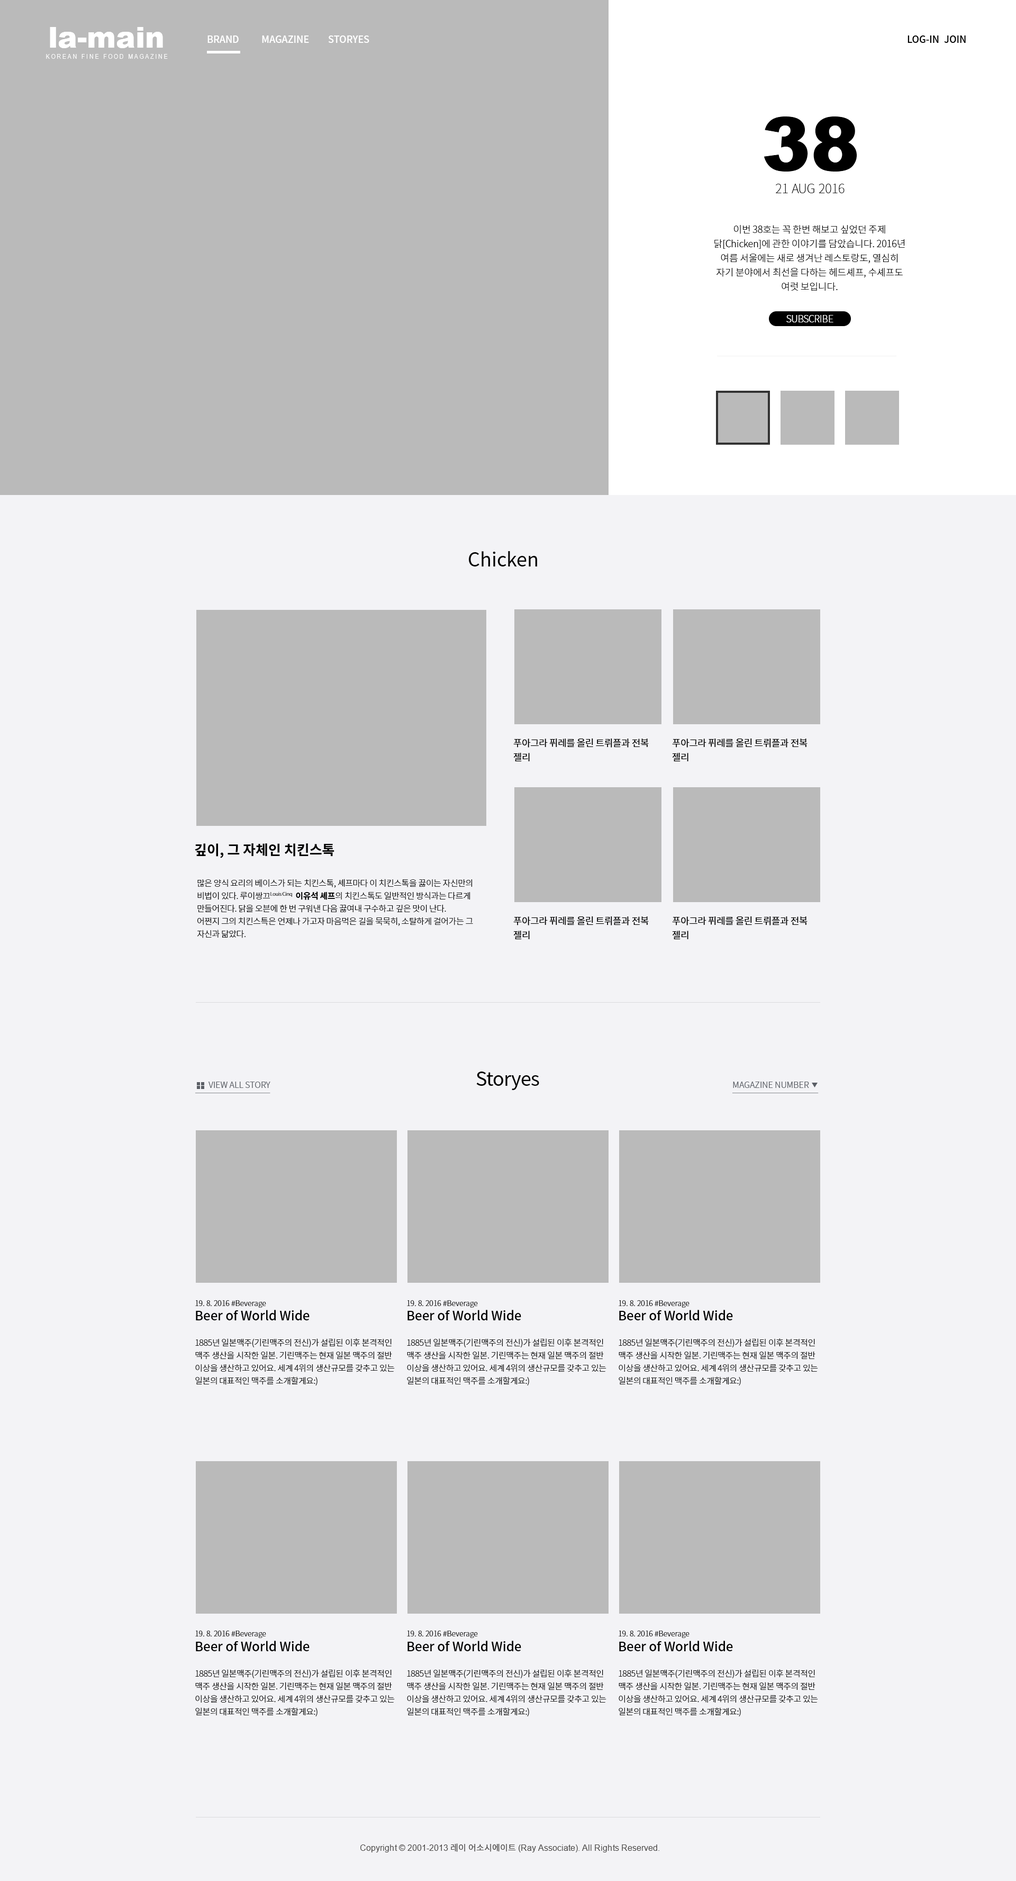
<style>
.page{position:relative;width:1016px;height:1881px;background:#f3f3f6}
.page>*{position:absolute;margin:0}
.t1{font:29.1px "Arial-Black";color:#ffffff}
.t2{font:9.5px "NotoSansCJKkr-Medium";color:#ffffff}
.t3{font:9.5px "NotoSansCJKkr-Medium";color:#000000}
.t4{font:6.9px "ArialNarrow";letter-spacing:0.2em;color:#ffffff}
.t5{font:73.7px "Arial-Black";color:#000000}
.t6{font:12.7px "NotoSansCJKkr-Thin";color:#000000}
.t7{font:9.5px "NotoSansCJKkr-Light";letter-spacing:-0.025em;color:#000000}
.t8{font:9.5px "NotoSansCJKkr-Light";letter-spacing:-0.025em;color:#ffffff}
.t9{font:19.1px "NotoSansCJKkr-Regular";color:#000000}
.t10{font:9.5px "NotoSansCJKkr-Regular";letter-spacing:-0.025em;color:#000000}
.t11{font:13.8px "NotoSansCJKkr-Bold";color:#000000}
.t12{font:8.5px "NotoSansCJKkr-Light";letter-spacing:-0.025em;color:#000000}
.t13{font:8.5px "NotoSansCJKkr-Bold";letter-spacing:-0.025em;color:#000000}
.t14{font:19.1px "NotoSansCJKkr-Regular";letter-spacing:-0.025em;color:#000000}
.t15{font:8.5px "NotoSansCJKkr-Light";color:#5a5e65;text-transform:uppercase;text-decoration:underline}
.t16{font:7.4px "NotoSansCJKkr-Light";color:#000000}
.t17{font:12.7px "NotoSansCJKkr-Medium";color:#000000}
.t18{font:8.5px "ArialMT";color:#4d4b4a}
.t19{font:8.5px "NotoSansCJKkr-Regular";color:#4d4b4a}
</style>
<div class="page">
<p class="t1" style="left:50px;top:27px;width:113px;height:21px">la-main</p>
<p class="t2" style="left:208px;top:35px;width:31px;height:8px">BRAND</p>
<p class="t2" style="left:262px;top:35px;width:47px;height:8px">MAGAZINE</p>
<p class="t2" style="left:329px;top:35px;width:41px;height:8px">STORYES</p>
<p class="t3" style="left:908px;top:35px;width:31px;height:8px">LOG-IN</p>
<p class="t3" style="left:944px;top:35px;width:22px;height:8px">JOIN</p>
<p class="t4" style="left:46px;top:54px;width:122px;height:5px">KOREAN FINE FOOD MAGAZINE</p>
<p class="t5" style="left:764px;top:116px;width:93px;height:56px">38</p>
<p class="t6" style="left:776px;top:184px;width:69px;height:9px">21 AUG 2016</p>
<p class="t7" style="left:715px;top:225px;width:190px;height:66px;text-align:center">이번 38호는 꼭 한번 해보고 싶었던 주제 닭[Chicken]에 관한 이야기를 담았습니다. 2016년 여름 서울에는 새로 생겨난 레스토랑도, 열심히 자기 분야에서 최선을 다하는 헤드셰프, 수셰프도 여럿 보입니다.</p>
<p class="t8" style="left:787px;top:315px;width:47px;height:7px">SUBSCRIBE</p>
<p class="t9" style="left:469px;top:551px;width:68px;height:15px">Chicken</p>
<p class="t10" style="left:514px;top:738px;width:135px;height:24px">푸아그라 퓌레를 올린 트뤼플과 전복 젤리</p>
<p class="t10" style="left:672px;top:738px;width:136px;height:24px">푸아그라 퓌레를 올린 트뤼플과 전복 젤리</p>
<p class="t11" style="left:195px;top:843px;width:140px;height:15px">깊이, 그 자체인 치킨스톡</p>
<p class="t12" style="left:197px;top:879px;width:276px;height:59px">많은 양식 요리의 베이스가 되는 치킨스톡, 셰프마다 이 치킨스톡을 끓이는 자신만의 비법이 있다. 루이쌍끄Louis Cinq  <span class="t13">이유석 셰프</span>의 치킨스톡도 일반적인 방식과는 다르게 만들어진다. 닭을 오븐에 한 번 구워낸 다음 끓여내 구수하고 깊은 맛이 난다. <br>어쩐지 그의 치킨스특은 언제나 가고자 마음먹은 길을 묵묵히, 소탈하게 걸어가는 그 자신과 닮았다.</p>
<p class="t10" style="left:514px;top:916px;width:135px;height:24px">푸아그라 퓌레를 올린 트뤼플과 전복 젤리</p>
<p class="t10" style="left:672px;top:916px;width:136px;height:24px">푸아그라 퓌레를 올린 트뤼플과 전복 젤리</p>
<p class="t14" style="left:476px;top:1072px;width:63px;height:18px">Storyes</p>
<p class="t15" style="left:195px;top:1082px;width:76px;height:11px">view all story</p>
<p class="t15" style="left:733px;top:1082px;width:86px;height:11px">magazine number</p>
<p class="t16" style="left:195px;top:1300px;width:71px;height:8px">19. 8. 2016 #Beverage</p>
<p class="t16" style="left:407px;top:1300px;width:71px;height:8px">19. 8. 2016 #Beverage</p>
<p class="t16" style="left:619px;top:1300px;width:71px;height:8px">19. 8. 2016 #Beverage</p>
<p class="t12" style="left:195px;top:1310px;width:200px;height:75px"><span class="t17">Beer of World Wide<br></span><br>1885년 일본맥주(기린맥주의 전신)가 설립된 이후 본격적인 맥주 생산을 시작한 일본. 기린맥주는 현재 일본 맥주의 절반 이상을 생산하고 있어요. 세계 4위의 생산규모를 갖추고 있는 일본의 대표적인 맥주를 소개할게요:)</p>
<p class="t12" style="left:407px;top:1310px;width:200px;height:75px"><span class="t17">Beer of World Wide<br></span><br>1885년 일본맥주(기린맥주의 전신)가 설립된 이후 본격적인 맥주 생산을 시작한 일본. 기린맥주는 현재 일본 맥주의 절반 이상을 생산하고 있어요. 세계 4위의 생산규모를 갖추고 있는 일본의 대표적인 맥주를 소개할게요:)</p>
<p class="t12" style="left:619px;top:1310px;width:199px;height:75px"><span class="t17">Beer of World Wide<br></span><br>1885년 일본맥주(기린맥주의 전신)가 설립된 이후 본격적인 맥주 생산을 시작한 일본. 기린맥주는 현재 일본 맥주의 절반 이상을 생산하고 있어요. 세계 4위의 생산규모를 갖추고 있는 일본의 대표적인 맥주를 소개할게요:)</p>
<p class="t16" style="left:195px;top:1631px;width:71px;height:7px">19. 8. 2016 #Beverage</p>
<p class="t16" style="left:407px;top:1631px;width:71px;height:7px">19. 8. 2016 #Beverage</p>
<p class="t16" style="left:619px;top:1631px;width:71px;height:7px">19. 8. 2016 #Beverage</p>
<p class="t12" style="left:195px;top:1641px;width:200px;height:75px"><span class="t17">Beer of World Wide<br></span><br>1885년 일본맥주(기린맥주의 전신)가 설립된 이후 본격적인 맥주 생산을 시작한 일본. 기린맥주는 현재 일본 맥주의 절반 이상을 생산하고 있어요. 세계 4위의 생산규모를 갖추고 있는 일본의 대표적인 맥주를 소개할게요:)</p>
<p class="t12" style="left:407px;top:1641px;width:200px;height:75px"><span class="t17">Beer of World Wide<br></span><br>1885년 일본맥주(기린맥주의 전신)가 설립된 이후 본격적인 맥주 생산을 시작한 일본. 기린맥주는 현재 일본 맥주의 절반 이상을 생산하고 있어요. 세계 4위의 생산규모를 갖추고 있는 일본의 대표적인 맥주를 소개할게요:)</p>
<p class="t12" style="left:619px;top:1641px;width:199px;height:75px"><span class="t17">Beer of World Wide<br></span><br>1885년 일본맥주(기린맥주의 전신)가 설립된 이후 본격적인 맥주 생산을 시작한 일본. 기린맥주는 현재 일본 맥주의 절반 이상을 생산하고 있어요. 세계 4위의 생산규모를 갖추고 있는 일본의 대표적인 맥주를 소개할게요:)</p>
<p class="t18" style="left:361px;top:1843px;width:299px;height:9px">Copyright © 2001-2013 <span class="t19">레이 어소시에이트</span> (Ray Associate). All Rights Reserved.</p>
</div>
